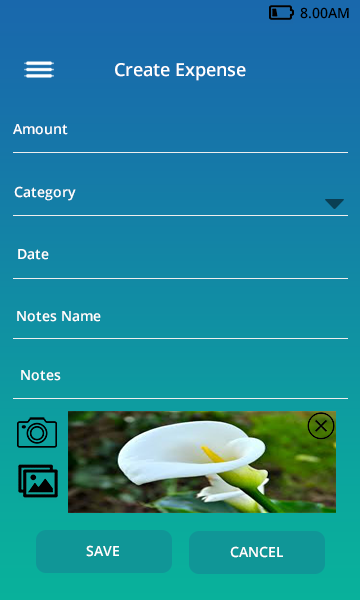
<style>
.page{position:relative;width:360px;height:600px}
.page>*{position:absolute;margin:0}
.t1{font:14px "OpenSans-Semibold";color:#000000}
.t2{font:18px "OpenSans-Semibold";color:#ffffff}
.t3{font:14px "OpenSans-Semibold";color:#ffffff}
</style>
<div class="page">
<p class="t1" style="left:300px;top:7px;width:49px;height:12px">8.00AM</p>
<p class="t2" style="left:115px;top:63px;width:131px;height:18px">Create Expense</p>
<p class="t3" style="left:13px;top:124px;width:55px;height:11px">Amount</p>
<p class="t3" style="left:14px;top:186px;width:62px;height:15px">Category</p>
<p class="t3" style="left:18px;top:249px;width:31px;height:11px">Date</p>
<p class="t3" style="left:17px;top:311px;width:84px;height:11px">Notes Name</p>
<p class="t3" style="left:21px;top:370px;width:40px;height:11px">Notes</p>
<p class="t3" style="left:86px;top:545px;width:33px;height:12px">SAVE</p>
<p class="t3" style="left:230px;top:546px;width:53px;height:12px">CANCEL</p>
</div>
